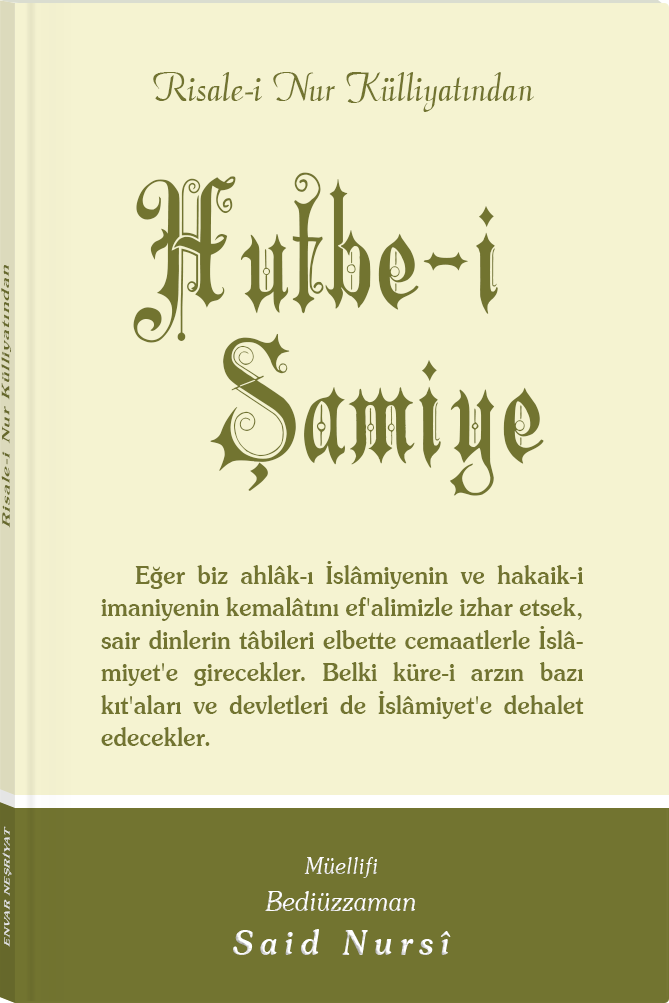
<style>
.page{position:relative;width:669px;height:1003px;background:#f5f3d1}
.page>*{position:absolute;margin:0}
.t1{font:45.3px "Barla © 072 Aria ScriptScriptSSi";color:#727430;scale:0.94 1}
.t2{font:172px/153.4px "Barla © 001 Liva Nur";letter-spacing:-0.001em;color:#727430;scale:0.93 1}
.t3{font:11.4px "Souvenir-Medium";letter-spacing:0.08em;color:#727430;scale:1.65 1}
.t4{font:25.4px/32.5px "Souvenir-Medium";color:#727430;scale:0.93 1}
.t5{font:8.3px "Souvenir-Medium";letter-spacing:0.08em;color:#e5e5e5;scale:1.43 1}
.t6{font:27.1px/37.8px "Souvenir-LightItalic";color:#ffffff;scale:0.92 1}
.t7{font:22.8px/39.8px "Souvenir-LightItalic";color:#ffffff;scale:0.92 1}
.t8{font:33.9px/43.8px "Souvenir-MediumItalic";letter-spacing:0.2em;color:#ffffff;scale:0.92 1}
</style>
<div class="page">
<p class="t1" style="left:153px;top:72px;width:381px;height:40px">Risale-i Nur Külliyatından</p>
<p class="t2" style="left:133px;top:172px;width:411px;height:324px;text-align:center">Hutbe-i<br>    Şamiye</p>
<p class="t3" style="left:1px;top:265px;width:10px;height:263px;rotate:-90deg">Risale-i Nur Külliyatından</p>
<p class="t4" style="left:101px;top:561px;width:483px;height:185px;text-align:justify">Eğer biz ahlâk-ı İslâmiyenin ve hakaik-i imaniyenin kemalâtını ef'alimizle izhar etsek, sair dinlerin tâbileri elbette cemaatlerle İslâmiyet'e girecekler. Belki küre-i arzın bazı kıt'aları ve devletleri de İslâmiyet'e dehalet edecekler.</p>
<p class="t5" style="left:2px;top:826px;width:10px;height:121px;rotate:-90deg">ENVAR NEŞRİYAT</p>
<p class="t6" style="left:233px;top:857px;width:218px;height:98px;text-align:center"><span class="t7">Müellifi<br></span>Bediüzzaman<br><span class="t8">Said Nursî</span></p>
</div>
